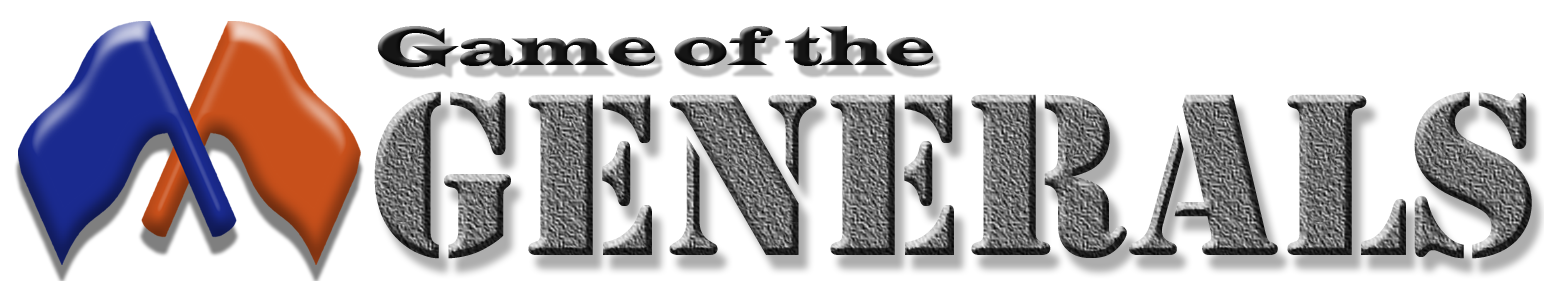
<style>
.page{position:relative;width:1544px;height:281px;background:#ffffff}
.page>*{position:absolute;margin:0}
.t1{font:56px "LatinWide";color:#151515}
.t2{font:240px "Stencil"}
</style>
<div class="page">
<p class="t1" style="left:377px;top:26px;width:557px;height:41px">Game of the</p>
<p class="t2" style="left:374px;top:91px;width:1158px;height:168px">GENERALS</p>
</div>
